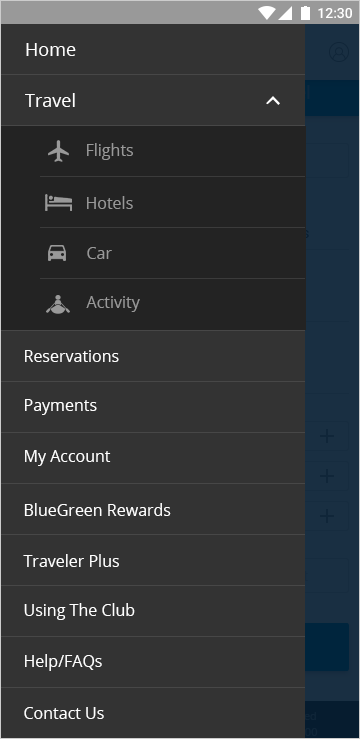
<style>
.page{position:relative;width:360px;height:739px;background:#333333}
.page>*{position:absolute;margin:0}
.t1{font:18px "OpenSans";color:#ffffff}
.t2{font:16px "OpenSans";color:#999999}
.t3{font:16px "OpenSans";color:#ffffff}
</style>
<div class="page">
<p class="t1" style="left:26px;top:43px;width:50px;height:13px">Home</p>
<p class="t1" style="left:25px;top:93px;width:50px;height:14px">Travel</p>
<p class="t2" style="left:87px;top:143px;width:46px;height:17px">Flights</p>
<p class="t2" style="left:87px;top:196px;width:46px;height:13px">Hotels</p>
<p class="t2" style="left:87px;top:247px;width:25px;height:12px">Car</p>
<p class="t2" style="left:86px;top:296px;width:54px;height:16px">Activity</p>
<p class="t3" style="left:25px;top:350px;width:94px;height:12px">Reservations</p>
<p class="t3" style="left:25px;top:399px;width:72px;height:16px">Payments</p>
<p class="t3" style="left:25px;top:450px;width:86px;height:16px">My Account</p>
<p class="t3" style="left:24px;top:503px;width:147px;height:13px">BlueGreen Rewards</p>
<p class="t3" style="left:23px;top:554px;width:96px;height:13px">Traveler Plus</p>
<p class="t3" style="left:24px;top:603px;width:111px;height:17px">Using The Club</p>
<p class="t3" style="left:25px;top:654px;width:77px;height:17px">Help/FAQs</p>
<p class="t3" style="left:24px;top:707px;width:80px;height:12px">Contact Us</p>
</div>
